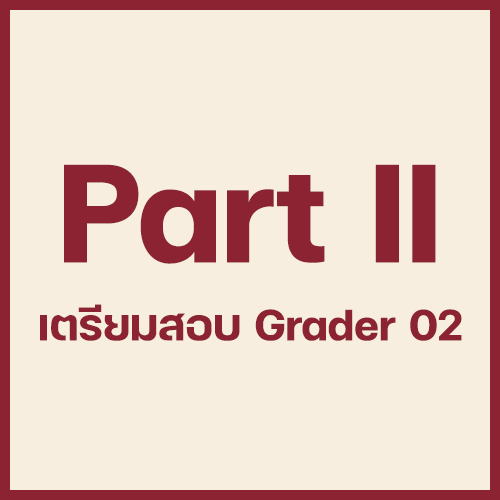
<style>
.page{position:relative;width:500px;height:500px;background:#f8eedf}
.page>*{position:absolute;margin:0}
.t1{font:190px "FCMinimalBold";color:#8b2332}
.t2{font:60px "FCMinimalBold";color:#8b2332}
</style>
<div class="page">
<p class="t1" style="left:64px;top:164px;width:372px;height:100px">Part II</p>
<p class="t2" style="left:40px;top:304px;width:422px;height:37px">เตรียมสอบ Grader 02</p>
</div>
